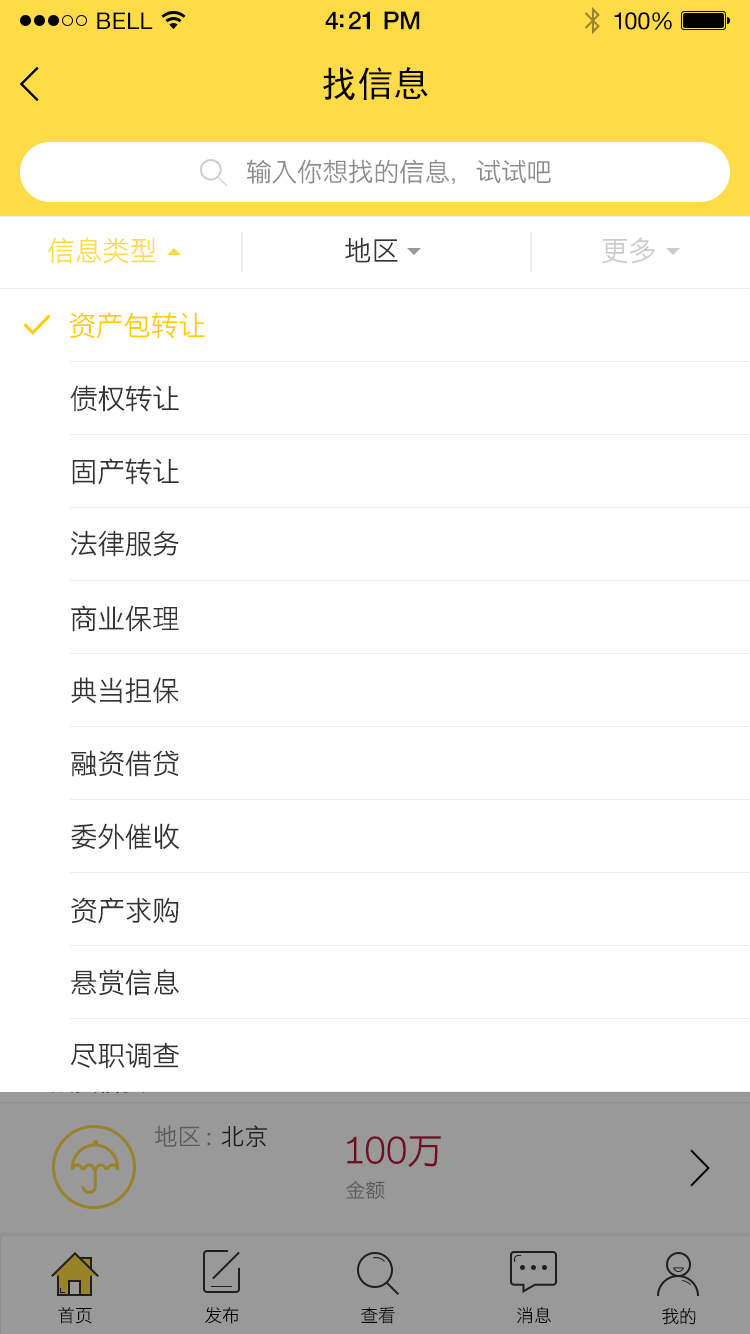
<style>
.page{position:relative;width:750px;height:1334px;background:#ffffff}
.page>*{position:absolute;margin:0}
.t1{font:23px "HelveticaNeue";letter-spacing:0.02em;color:#000000}
.t2{font:25px "HelveticaNeue-Medium";letter-spacing:-0.02em;color:#000000}
.t3{font:24px "HelveticaNeue";letter-spacing:-0.02em;color:#010101}
.t4{font:36px "SimHei";color:#000000}
.t5{font:26px "STHeitiSC-Light";letter-spacing:-0.02em;color:#8d8d8d}
.t6{font:28px "STHeitiSC-Light";letter-spacing:-0.02em;color:#fedb47}
.t7{font:28px "STHeitiSC-Light";letter-spacing:-0.02em;color:#353535}
.t8{font:28px "STHeitiSC-Light";letter-spacing:-0.02em;color:#cccccc}
.t9{font:28px "STHeitiSC-Light";letter-spacing:-0.02em;color:#ffcc00}
.t10{font:28px "STHeitiSC-Light";letter-spacing:-0.02em;color:#333333}
.t11{font:24px "STHeitiSC-Light";letter-spacing:-0.02em}
.t12{font:36px "STHeitiSC-Light";letter-spacing:-0.02em;color:#730c29}
.t13{font:20px "STHeitiSC-Light";letter-spacing:-0.02em;color:#5c5c5c}
.t14{font:18px "STHeitiSC-Light";letter-spacing:-0.02em;color:#000000}
</style>
<div class="page">
<p class="t1" style="left:97px;top:12px;width:56px;height:17px">BELL</p>
<p class="t1" style="left:97px;top:12px;width:56px;height:17px">BELL</p>
<p class="t2" style="left:325px;top:11px;width:95px;height:19px">4:21 PM</p>
<p class="t2" style="left:325px;top:11px;width:95px;height:19px">4:21 PM</p>
<p class="t3" style="left:614px;top:12px;width:58px;height:18px">100%</p>
<p class="t3" style="left:614px;top:12px;width:58px;height:18px">100%</p>
<p class="t4" style="left:323px;top:67px;width:105px;height:34px">找信息</p>
<p class="t5" style="left:247px;top:159px;width:304px;height:25px">输入你想找的信息，试试吧</p>
<p class="t6" style="left:48px;top:237px;width:108px;height:27px">信息类型</p>
<p class="t7" style="left:345px;top:237px;width:53px;height:26px">地区</p>
<p class="t8" style="left:602px;top:237px;width:53px;height:27px">更多</p>
<p class="t9" style="left:69px;top:312px;width:136px;height:27px">资产包转让</p>
<p class="t10" style="left:70px;top:385px;width:109px;height:27px">债权转让</p>
<p class="t10" style="left:72px;top:458px;width:107px;height:27px">固产转让</p>
<p class="t10" style="left:71px;top:530px;width:108px;height:27px">法律服务</p>
<p class="t10" style="left:71px;top:605px;width:108px;height:27px">商业保理</p>
<p class="t10" style="left:71px;top:677px;width:108px;height:27px">典当担保</p>
<p class="t10" style="left:71px;top:750px;width:108px;height:27px">融资借贷</p>
<p class="t10" style="left:71px;top:823px;width:109px;height:27px">委外催收</p>
<p class="t10" style="left:71px;top:897px;width:108px;height:27px">资产求购</p>
<p class="t10" style="left:71px;top:969px;width:108px;height:27px">悬赏信息</p>
<p class="t10" style="left:70px;top:1042px;width:109px;height:27px">尽职调查</p>
<p class="t11" style="left:155px;top:1125px;width:112px;height:23px">地区 :  北京</p>
<p class="t12" style="left:347px;top:1136px;width:94px;height:32px">100万</p>
<p class="t13" style="left:346px;top:1180px;width:39px;height:20px">金额</p>
<p class="t14" style="left:58px;top:1307px;width:34px;height:17px">首页</p>
<p class="t14" style="left:205px;top:1307px;width:34px;height:17px">发布</p>
<p class="t14" style="left:361px;top:1307px;width:34px;height:17px">查看</p>
<p class="t14" style="left:517px;top:1306px;width:34px;height:18px">消息</p>
<p class="t14" style="left:662px;top:1308px;width:34px;height:17px">我的</p>
</div>
